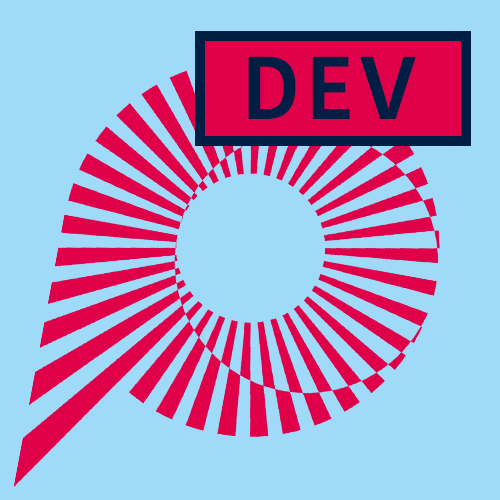
<style>
.page{position:relative;width:500px;height:500px;background:#9fdaf9}
.page>*{position:absolute;margin:0}
.t1{font:87.8px "KohinoorDevanagari-Semibold";letter-spacing:0.04em;color:#001e44;font-weight:bold}
</style>
<div class="page">
<p class="t1" style="left:248px;top:56px;width:168px;height:63px">DEV</p>
</div>
